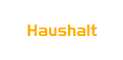
<style>
.page{position:relative;width:123px;height:60px;background:#ffffff}
.page>*{position:absolute;margin:0}
.t1{font:16px "AeroRegularSWFTE";color:#ffad00}
</style>
<div class="page">
<p class="t1" style="left:27px;top:24px;width:70px;height:12px">Haushalt</p>
</div>
